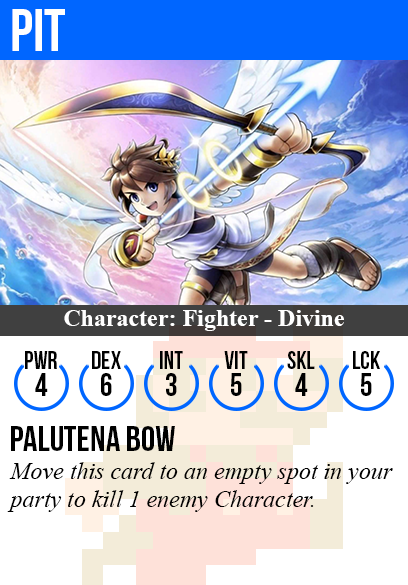
<style>
.page{position:relative;width:408px;height:585px;background:#ffffff}
.page>*{position:absolute;margin:0}
.t1{font:60px "BebasNeue";color:#ffffff}
.t2{font:24px "TimesNewRomanPS-BoldMT";color:#ffffff}
.t3{font:25px "BebasNeue";color:#000000}
.t4{font:32px "BebasNeue";color:#000000}
.t5{font:36px "BebasNeue";color:#000000}
.t6{font:24px "TimesNewRomanPS-ItalicMT";color:#000000}
</style>
<div class="page">
<p class="t1" style="left:12px;top:9px;width:53px;height:42px">pit</p>
<p class="t2" style="left:64px;top:310px;width:280px;height:21px">Character: Fighter - Divine</p>
<p class="t3" style="left:25px;top:351px;width:32px;height:18px">PWR</p>
<p class="t3" style="left:92px;top:351px;width:29px;height:18px">dex</p>
<p class="t3" style="left:160px;top:351px;width:23px;height:18px">int</p>
<p class="t3" style="left:224px;top:351px;width:24px;height:18px">vit</p>
<p class="t3" style="left:287px;top:351px;width:28px;height:18px">skl</p>
<p class="t3" style="left:353px;top:351px;width:27px;height:18px">lck</p>
<p class="t4" style="left:35px;top:373px;width:13px;height:23px">4</p>
<p class="t4" style="left:101px;top:373px;width:11px;height:23px">6</p>
<p class="t4" style="left:166px;top:373px;width:11px;height:23px">3</p>
<p class="t4" style="left:231px;top:373px;width:11px;height:23px">5</p>
<p class="t4" style="left:295px;top:373px;width:13px;height:23px">4</p>
<p class="t4" style="left:361px;top:373px;width:11px;height:23px">5</p>
<p class="t5" style="left:11px;top:426px;width:164px;height:25px">palutena bow</p>
<p class="t6" style="left:7px;top:462px;width:386px;height:50px">Move this card to an empty spot in your<br>party to kill 1 enemy Character.</p>
</div>
